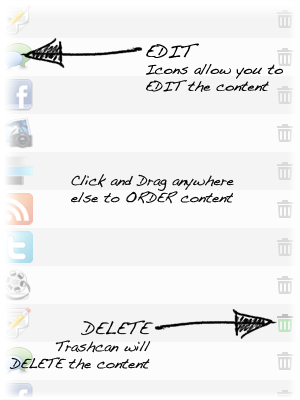
<style>
.page{position:relative;width:300px;height:400px;background:#fcfcfc}
.page>*{position:absolute;margin:0}
.t1{font:14px "Handwriting-Dakota";color:#000000}
.t2{font:18px "Handwriting-Dakota";color:#000000}
</style>
<div class="page">
<p class="t1" style="left:146px;top:43px;width:137px;height:49px"><span class="t2">EDIT<br></span>Icons allow you to <br>EDIT the content</p>
<p class="t1" style="left:71px;top:174px;width:163px;height:30px;text-align:center">Click and Drag anywhere<br>else to ORDER content</p>
<p class="t1" style="left:9px;top:320px;width:145px;height:50px;text-align:right"><span class="t2">DELETE<br></span>Trashcan will<br>DELETE the content</p>
</div>
